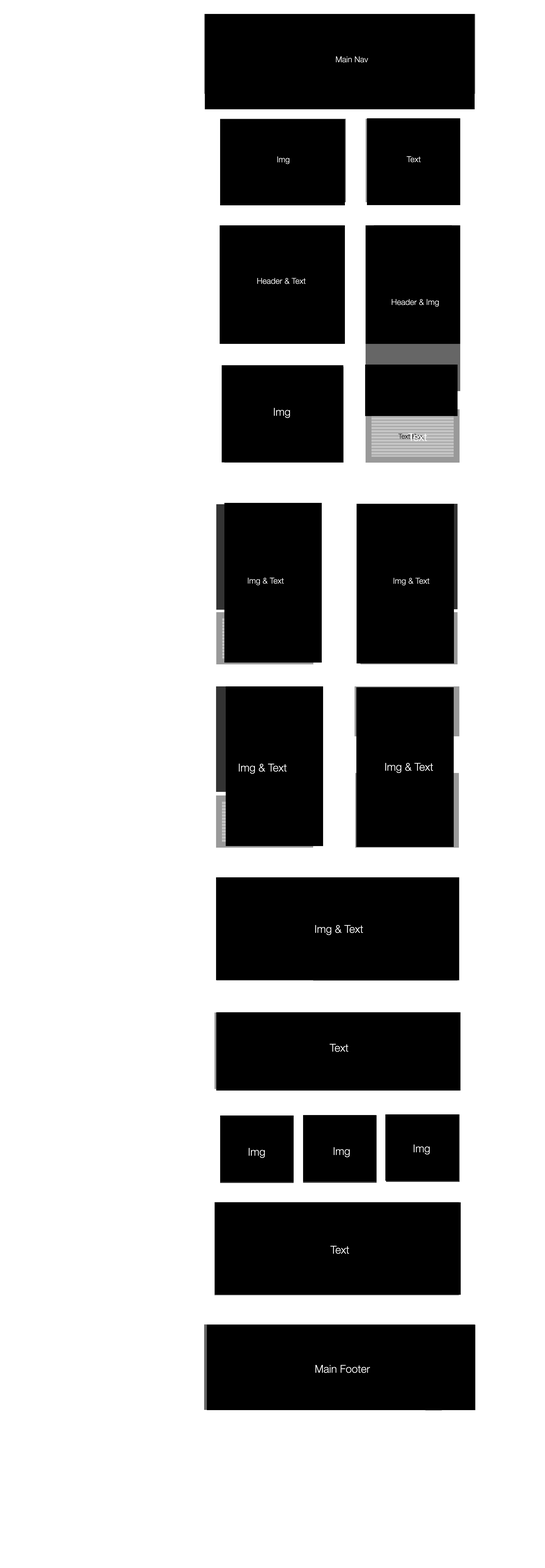
<style>
.page{position:relative;width:545px;height:1568px;background:#ffffff}
.page>*{position:absolute;margin:0}
.t1{font:8.1px "HelveticaNeue-Light";color:#ffffff}
.t2{font:10.8px "HelveticaNeue-Light";color:#ffffff}
.t3{font:6.7px "HelveticaNeue-Light";color:#010000}
</style>
<div class="page">
<p class="t1" style="left:336px;top:56px;width:32px;height:7px">Main Nav</p>
<p class="t1" style="left:277px;top:156px;width:12px;height:8px">Img</p>
<p class="t1" style="left:407px;top:156px;width:14px;height:6px">Text</p>
<p class="t1" style="left:257px;top:278px;width:49px;height:6px">Header &amp; Text</p>
<p class="t1" style="left:392px;top:299px;width:47px;height:8px">Header &amp; Img</p>
<p class="t2" style="left:274px;top:408px;width:16px;height:10px">Img</p>
<p class="t3" style="left:398px;top:434px;width:26px;height:5px">Text Box</p>
<p class="t2" style="left:408px;top:433px;width:19px;height:8px">Text</p>
<p class="t1" style="left:248px;top:578px;width:36px;height:7px">Img &amp; Text</p>
<p class="t1" style="left:394px;top:578px;width:36px;height:7px">Img &amp; Text</p>
<p class="t2" style="left:239px;top:764px;width:48px;height:10px">Img &amp; Text</p>
<p class="t2" style="left:385px;top:763px;width:48px;height:10px">Img &amp; Text</p>
<p class="t2" style="left:315px;top:925px;width:48px;height:10px">Img &amp; Text</p>
<p class="t2" style="left:330px;top:1044px;width:18px;height:8px">Text</p>
<p class="t2" style="left:414px;top:1145px;width:16px;height:10px">Img</p>
<p class="t2" style="left:249px;top:1148px;width:16px;height:10px">Img</p>
<p class="t2" style="left:334px;top:1147px;width:16px;height:10px">Img</p>
<p class="t2" style="left:330px;top:1246px;width:19px;height:8px">Text</p>
<p class="t2" style="left:316px;top:1365px;width:54px;height:8px">Main Footer</p>
</div>
